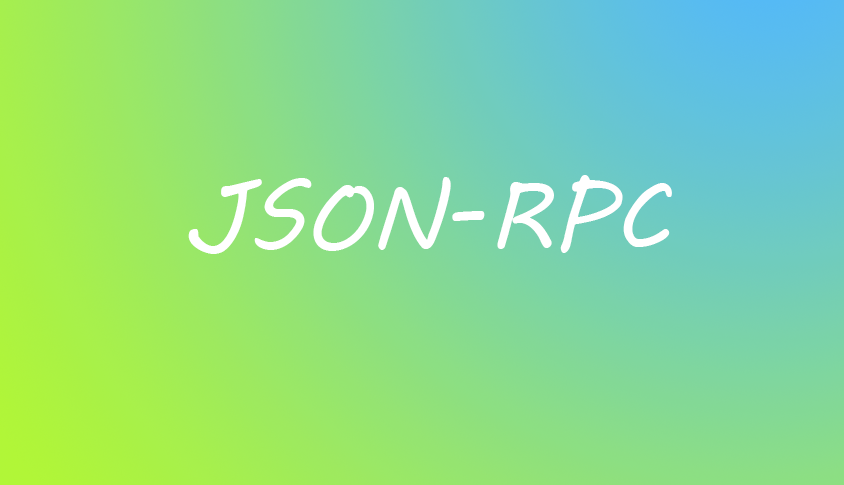
<style>
.page{position:relative;width:844px;height:485px}
.page>*{position:absolute;margin:0}
.t1{font:93.3px "MVBoli";color:#ffffff}
</style>
<div class="page">
<p class="t1" style="left:188px;top:175px;width:484px;height:79px">JSON-RPC</p>
</div>
